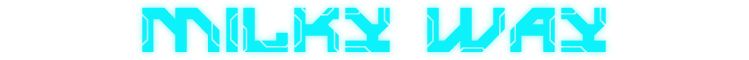
<style>
.page{position:relative;width:749px;height:60px;background:#ffffff}
.page>*{position:absolute;margin:0}
.t1{font:61.8px "valorax";color:#0df2fa}
</style>
<div class="page">
<p class="t1" style="left:142px;top:7px;width:464px;height:45px">MILKY WAY</p>
</div>
